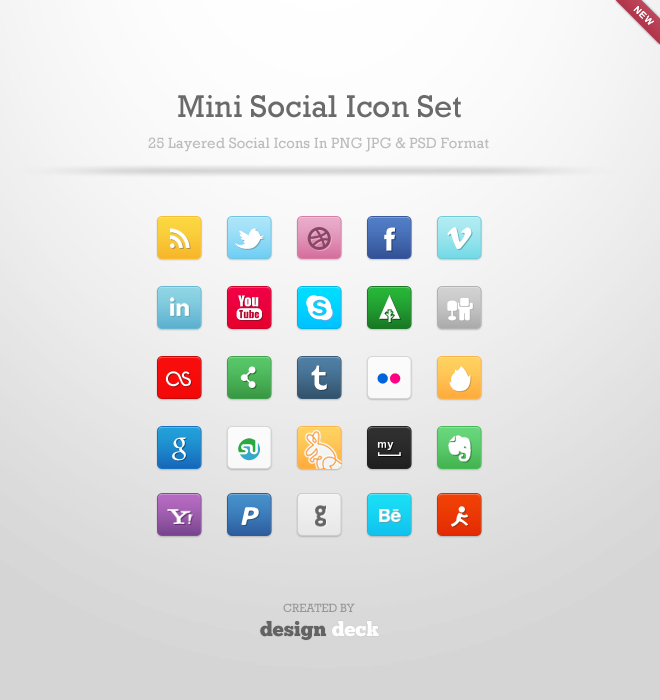
<style>
.page{position:relative;width:660px;height:700px}
.page>*{position:absolute;margin:0}
.t1{font:32px "Rockwell";color:#6a6a6a}
.t2{font:15px "Rockwell";color:#bdbdbd}
.t3{font:12px "Rockwell";letter-spacing:-0.015em;color:#989898;text-transform:uppercase}
.t4{font:20px "ChunkFive";letter-spacing:0.005em;color:#626262}
.t5{font:20px "ChunkFive";letter-spacing:0.005em;color:#ffffff}
</style>
<div class="page">
<p class="t1" style="left:178px;top:95px;width:283px;height:23px">Mini Social Icon Set</p>
<p class="t2" style="left:148px;top:137px;width:341px;height:15px">25 Layered Social Icons In PNG JPG &amp; PSD Format</p>
<p class="t3" style="left:283px;top:603px;width:72px;height:9px">Created by</p>
<p class="t4" style="left:260px;top:621px;width:119px;height:19px">design <span class="t5">deck</span></p>
</div>
